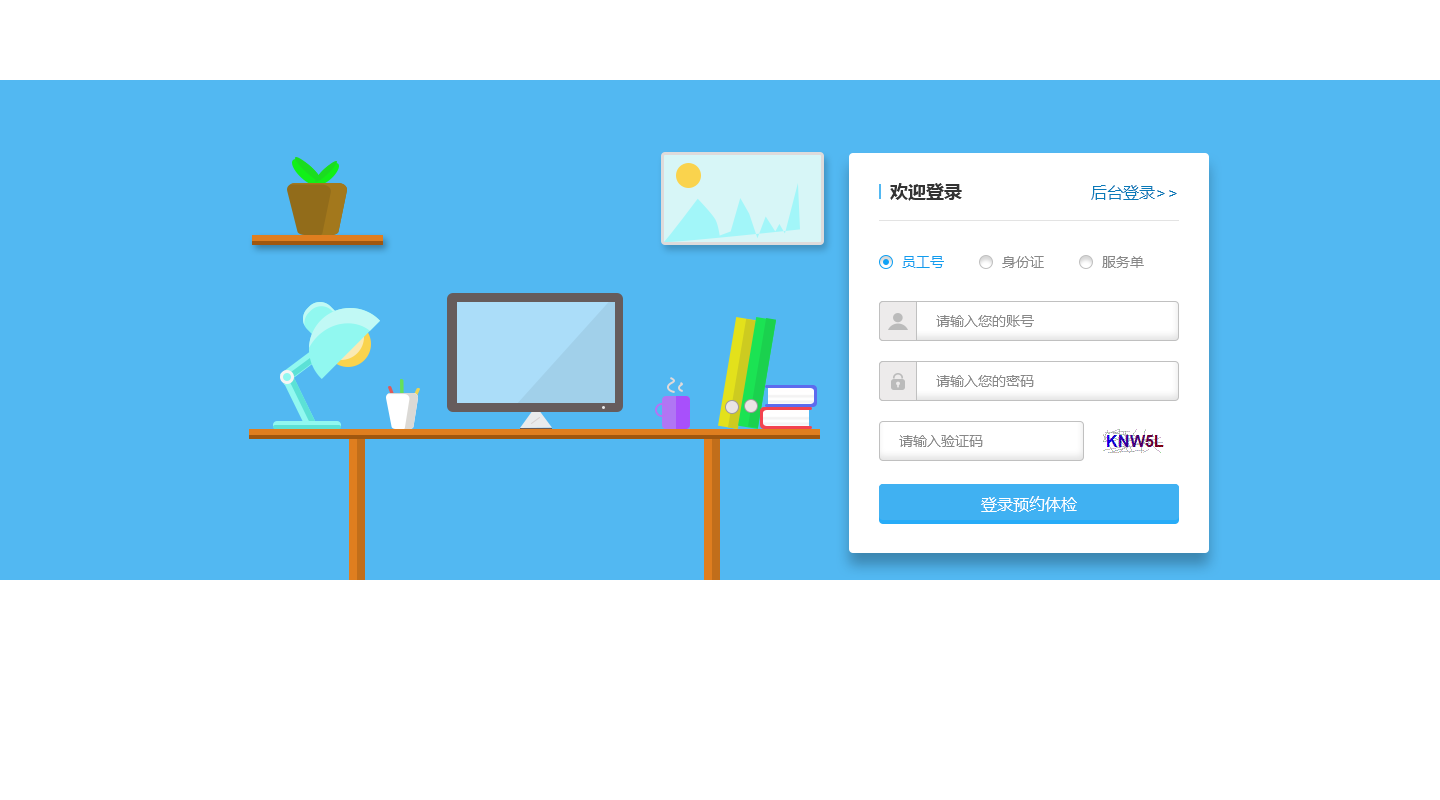
<style>
.page{position:relative;width:1440px;height:800px;background:#ffffff}
.page>*{position:absolute;margin:0}
.t1{font:18px "MicrosoftYaHei-Bold";color:#333333}
.t2{font:16px "MicrosoftYaHei";color:#0a79b8}
.t3{font:14px "MicrosoftYaHei";color:#109dee}
.t4{font:14px "MicrosoftYaHei";color:#888888}
.t5{font:16px "MicrosoftYaHei";color:#ffffff}
</style>
<div class="page">
<p class="t1" style="left:890px;top:183px;width:72px;height:18px">欢迎登录</p>
<p class="t2" style="left:1091px;top:185px;width:86px;height:15px">后台登录&gt;&gt;</p>
<p class="t3" style="left:902px;top:256px;width:42px;height:12px">员工号</p>
<p class="t4" style="left:1002px;top:256px;width:42px;height:12px">身份证</p>
<p class="t4" style="left:1102px;top:256px;width:42px;height:12px">服务单</p>
<p class="t4" style="left:936px;top:315px;width:98px;height:12px">请输入您的账号</p>
<p class="t4" style="left:936px;top:375px;width:98px;height:12px">请输入您的密码</p>
<p class="t4" style="left:899px;top:435px;width:84px;height:12px">请输入验证码</p>
<p class="t5" style="left:981px;top:496px;width:96px;height:16px">登录预约体检</p>
</div>
